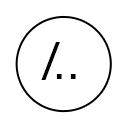
<style>
.page{position:relative;width:128px;height:128px;background:#ffffff}
.page>*{position:absolute;margin:0}
.t1{font:48.8px "Roboto-Regular";color:#000000}
</style>
<div class="page">
<p class="t1" style="left:41px;top:42px;width:19px;height:38px">/</p>
<p class="t1" style="left:56px;top:74px;width:20px;height:5px">..</p>
</div>
